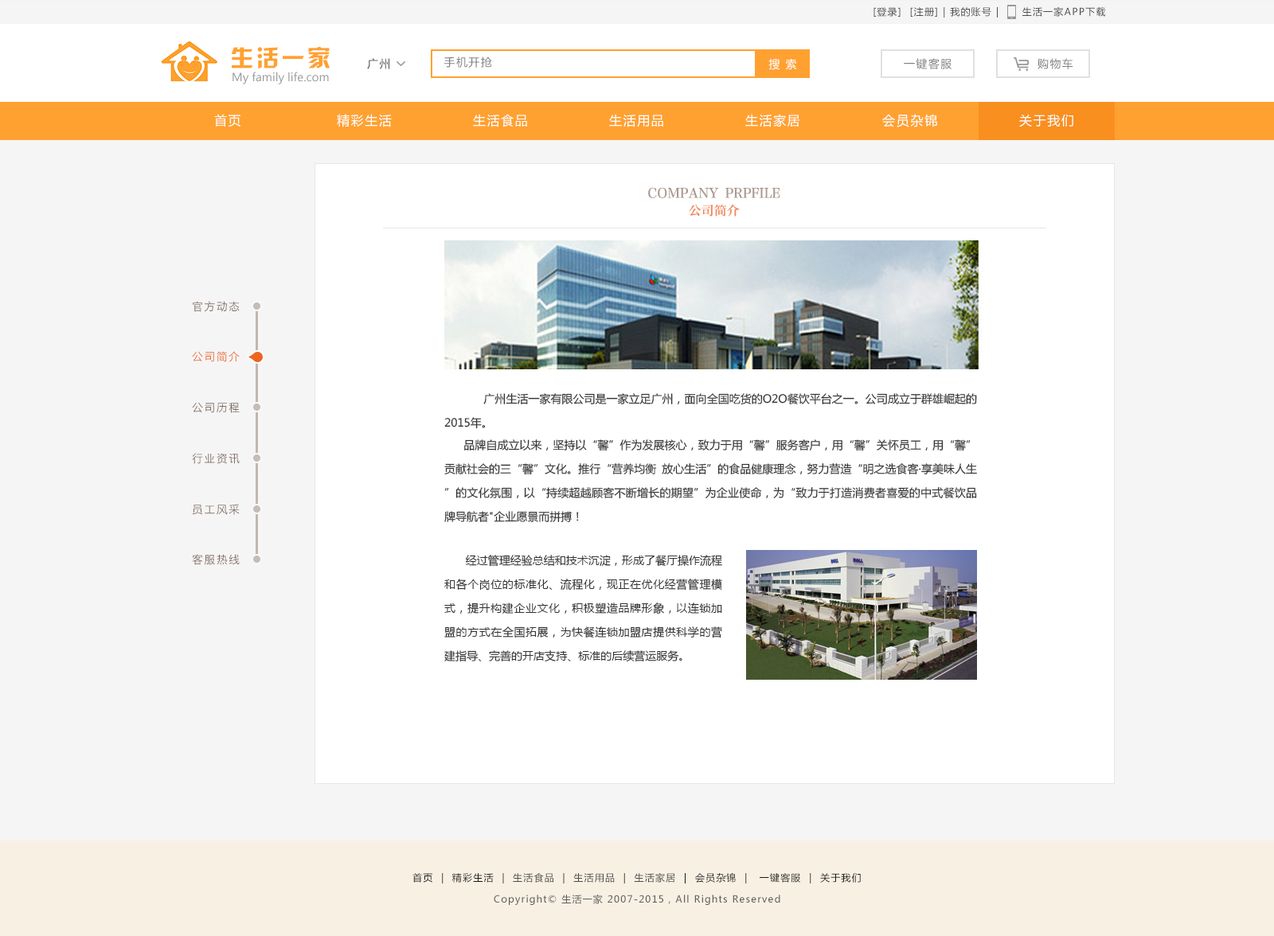
<style>
.page{position:relative;width:1274px;height:936px;background:#ffffff}
.page>*{position:absolute;margin:0}
.t1{font:9.6px "MicrosoftYaHei";letter-spacing:0.1em;color:#4d4d4d}
.t2{font:23.1px "HYk2gj";letter-spacing:0.1em;color:#ffa130}
.t3{font:11.1px "MicrosoftYaHei";letter-spacing:0.1em;color:#4d4d4d}
.t4{font:11.1px "MicrosoftYaHei";letter-spacing:0.1em;color:#808080}
.t5{font:11.1px "MicrosoftYaHei";letter-spacing:0.1em;color:#ffffff}
.t6{font:11.1px "MicrosoftYaHei";color:#999999}
.t7{font:12.7px "MicrosoftYaHei";letter-spacing:0.1em;color:#ffffff}
.t8{font:13.1px "MicrosoftYaHei";letter-spacing:0.1em;color:#ffffff}
.t9{font:12.7px/19.1px "FZZHYSJW--GB1-0";color:#aa988e}
.t10{font:12.7px/19.1px "FZZHYSJW--GB1-0";color:#f18555}
.t11{font:11.1px "STHeitiSC-Light";letter-spacing:0.1em;color:#816c61}
.t12{font:11.1px "STHeitiSC-Light";letter-spacing:0.1em;color:#eb6926}
.t13{font:11.1px/23.9px "MicrosoftYaHei";color:#333333}
.t14{font:11.2px/23.9px "MicrosoftYaHei";color:#333333}
.t15{font:9.6px "MicrosoftYaHei";letter-spacing:0.1em;color:#1a1a1a}
.t16{font:9.6px "MicrosoftYaHei";letter-spacing:0.1em;color:#5e5e5e}
</style>
<div class="page">
<p class="t1" style="left:873px;top:6px;width:233px;height:12px">[登录]  [注册] | 我的账号 |      生活一家APP下载</p>
<p class="t2" style="left:231px;top:47px;width:99px;height:22px">生活一家</p>
<p class="t3" style="left:367px;top:58px;width:22px;height:11px">广州</p>
<p class="t4" style="left:443px;top:57px;width:49px;height:11px">手机开抢</p>
<p class="t5" style="left:768px;top:58px;width:29px;height:12px">搜 索</p>
<p class="t4" style="left:904px;top:58px;width:48px;height:11px">一键客服</p>
<p class="t4" style="left:1037px;top:58px;width:36px;height:11px">购物车</p>
<p class="t6" style="left:232px;top:72px;width:97px;height:12px">My family life.com</p>
<p class="t7" style="left:214px;top:114px;width:26px;height:13px">首页</p>
<p class="t7" style="left:337px;top:114px;width:55px;height:13px">精彩生活</p>
<p class="t7" style="left:473px;top:114px;width:54px;height:13px">生活食品</p>
<p class="t7" style="left:609px;top:114px;width:54px;height:13px">生活用品</p>
<p class="t7" style="left:745px;top:114px;width:55px;height:13px">生活家居</p>
<p class="t8" style="left:882px;top:114px;width:55px;height:13px">会员杂锦</p>
<p class="t7" style="left:1019px;top:114px;width:54px;height:13px">关于我们</p>
<p class="t9" style="left:648px;top:187px;width:132px;height:30px;text-align:center">COMPANY PRPFILE<br><span class="t10">公司简介</span></p>
<p class="t11" style="left:193px;top:301px;width:47px;height:11px">官方动态</p>
<p class="t12" style="left:192px;top:351px;width:48px;height:11px">公司简介</p>
<p class="t13" style="left:444px;top:393px;width:533px;height:129px;text-align:justify">广州生活一家有限公司是一家立足广州，面向全国吃货的O2O餐饮平台之一。公司成立于群雄崛起的2015年。<br>     品牌自成立以来，坚持以“馨”作为发展核心，致力于用“馨”服务客户，用“馨”关怀员工，用“馨”贡献社会的三“馨”文化。推行“营养均衡 放心生活”的食品健康理念，努力营造“明之选食客·享美味人生”的文化氛围，以“持续超越顾客不断增长的期望”为企业使命，为“致力于打造消费者喜爱的中式餐饮品牌导航者"企业愿景而拼搏！</p>
<p class="t11" style="left:192px;top:402px;width:48px;height:11px">公司历程</p>
<p class="t11" style="left:192px;top:453px;width:48px;height:11px">行业资讯</p>
<p class="t11" style="left:192px;top:504px;width:48px;height:11px">员工风采</p>
<p class="t11" style="left:192px;top:554px;width:48px;height:11px">客服热线</p>
<p class="t14" style="left:444px;top:555px;width:278px;height:107px;text-align:justify">经过管理经验总结和技术沉淀，形成了餐厅操作流程和各个岗位的标准化、流程化，现正在优化经营管理模式，提升构建企业文化，积极塑造品牌形象，以连锁加盟的方式在全国拓展，为快餐连锁加盟店提供科学的营建指导、完善的开店支持、标准的后续营运服务。</p>
<p class="t15" style="left:412px;top:872px;width:449px;height:12px">首页  |  精彩生活  |  <span class="t1">生活食品</span>  |  <span class="t1">生活用品</span>  |  <span class="t1">生活家居</span>  |  会员杂锦  |   一键客服  |  关于我们</p>
<p class="t16" style="left:494px;top:894px;width:286px;height:11px">Copyright© 生活一家 2007-2015，All Rights Reserved</p>
</div>
